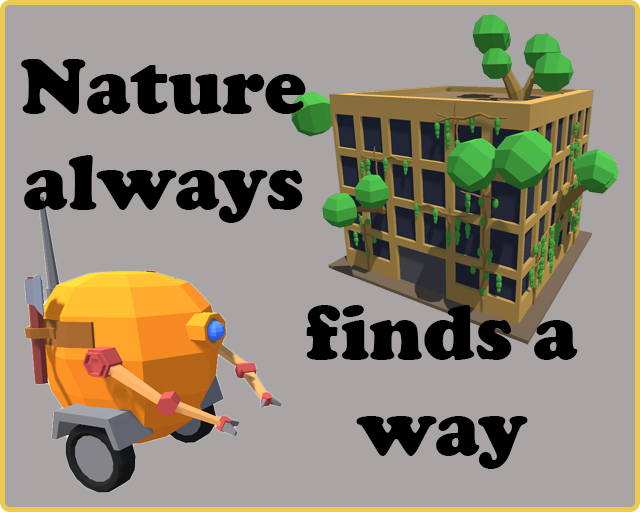
<style>
.page{position:relative;width:640px;height:512px;background:#a8a5a4}
.page>*{position:absolute;margin:0}
.t1{font:80px "CooperBlack";color:#000000}
</style>
<div class="page">
<p class="t1" style="left:21px;top:59px;width:285px;height:164px;text-align:center">Nature<br>always<br>finds <br>a way</p>
<p class="t1" style="left:306px;top:305px;width:272px;height:164px;text-align:center">finds a way</p>
</div>
